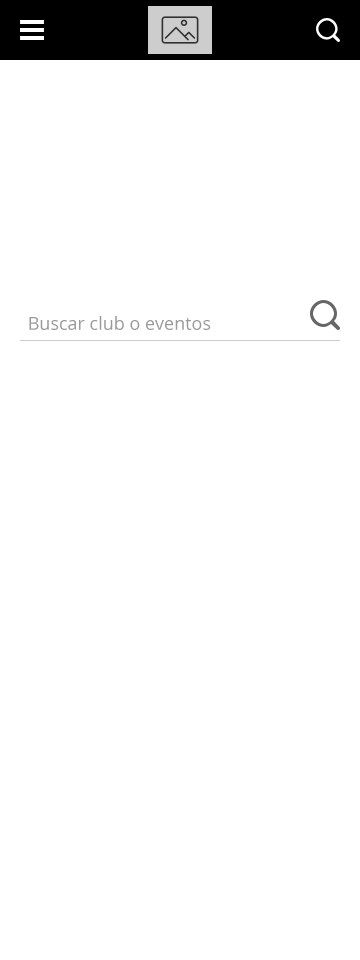
<style>
.page{position:relative;width:360px;height:960px;background:#ffffff}
.page>*{position:absolute;margin:0}
.t1{font:18px "OpenSans";color:#9a9a9a}
</style>
<div class="page">
<p class="t1" style="left:29px;top:316px;width:182px;height:14px">Buscar club o eventos</p>
</div>
